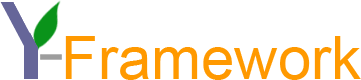
<style>
.page{position:relative;width:361px;height:80px;background:#ffffff}
.page>*{position:absolute;margin:0}
.t1{font:60px "ArialMT";color:#ff9900}
</style>
<div class="page">
<p class="t1" style="left:65px;top:36px;width:296px;height:44px">Framework</p>
</div>
